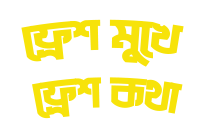
<style>
.page{position:relative;width:198px;height:136px;background:#ffffff}
.page>*{position:absolute;margin:0}
.t1{font:48px "LiHasanMeghaloyMatraANSIV1";letter-spacing:-0.01em;color:#f7e30a}
</style>
<div class="page">
<p class="t1" style="left:21px;top:19px;width:163px;height:100px">†d«k gy‡L<br>†d«k K_v</p>
</div>
